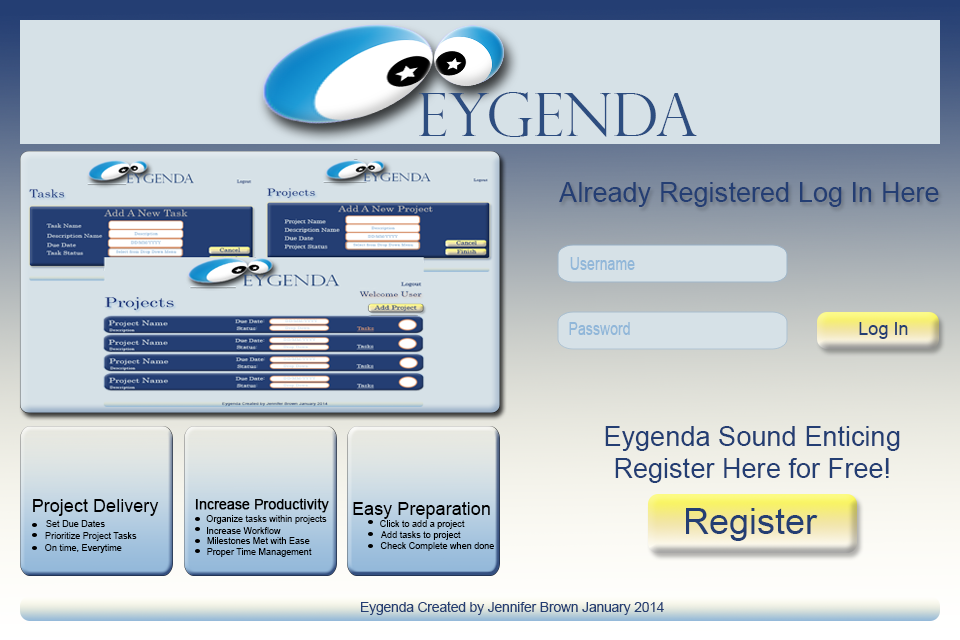
<style>
.page{position:relative;width:960px;height:640px;background:#d6e1e7}
.page>*{position:absolute;margin:0}
.t1{font:60px "PerpetuaTitlingMT-Light";color:#2d4d80}
.t2{font:27.2px "ArialMT";color:#243e73}
.t3{font:18.1px "ArialMT";color:#91b7d9;scale:0.78 1}
.t4{font:18.1px "ArialMT";color:#243e73}
.t5{font:18.1px "ArialMT";color:#000000}
.t6{font:13.6px "ArialMT";color:#000000;font-weight:bold}
.t7{font:36.2px "ArialMT";color:#243e73}
.t8{font:9.1px "ArialMT";color:#000000}
.t9{font:13.6px "ArialMT";color:#243e73}
</style>
<div class="page">
<p class="t1" style="left:419px;top:92px;width:278px;height:45px">EYGENDA</p>
<p class="t2" style="left:559px;top:182px;width:380px;height:25px">Already Registered Log In Here</p>
<p class="t3" style="left:570px;top:257px;width:65px;height:13px">Username</p>
<p class="t3" style="left:569px;top:322px;width:61px;height:13px">Password</p>
<p class="t4" style="left:859px;top:322px;width:49px;height:17px">Log In</p>
<p class="t2" style="left:605px;top:426px;width:295px;height:57px;text-align:center">Eygenda Sound Enticing<br>Register Here for Free!</p>
<p class="t5" style="left:33px;top:499px;width:126px;height:17px">Project Delivery</p>
<p class="t6" style="left:195px;top:498px;width:134px;height:15px">Increase Productivity</p>
<p class="t5" style="left:353px;top:502px;width:137px;height:17px">Easy Preparation</p>
<p class="t7" style="left:686px;top:508px;width:132px;height:33px">Register</p>
<p class="t8" style="left:46px;top:520px;width:59px;height:7px">Set Due Dates</p>
<p class="t8" style="left:206px;top:515px;width:121px;height:9px">Organize tasks within projects</p>
<p class="t8" style="left:380px;top:520px;width:85px;height:9px">Click to add a project</p>
<p class="t8" style="left:45px;top:532px;width:92px;height:9px">Prioritize Project Tasks</p>
<p class="t8" style="left:207px;top:527px;width:74px;height:7px">Increase Workflow</p>
<p class="t8" style="left:380px;top:531px;width:81px;height:9px">Add tasks to project</p>
<p class="t8" style="left:45px;top:544px;width:77px;height:9px">On time, Everytime</p>
<p class="t8" style="left:207px;top:537px;width:103px;height:7px">Milestones Met with Ease</p>
<p class="t8" style="left:380px;top:542px;width:114px;height:9px">Check Complete when done</p>
<p class="t8" style="left:207px;top:548px;width:105px;height:9px">Proper Time Management</p>
<p class="t9" style="left:361px;top:601px;width:303px;height:14px">Eygenda Created by Jennifer Brown January 2014</p>
</div>
